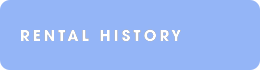
<style>
.page{position:relative;width:260px;height:70px;background:#94b5f7}
.page>*{position:absolute;margin:0}
.t1{font:15px "UTMAvoBold";letter-spacing:0.2em;color:#ffffff}
</style>
<div class="page">
<p class="t1" style="left:21px;top:29px;width:160px;height:13px">RENTAL HISTORY</p>
<p class="t1" style="left:21px;top:29px;width:160px;height:13px">RENTAL HISTORY</p>
</div>
